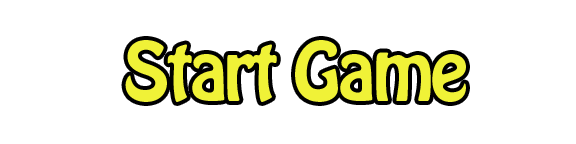
<style>
.page{position:relative;width:576px;height:144px;background:#ffffff}
.page>*{position:absolute;margin:0}
.t1{font:72px "HoboStd";letter-spacing:-0.04em;color:#f0f237}
</style>
<div class="page">
<p class="t1" style="left:125px;top:40px;width:341px;height:62px">Start Game</p>
</div>
